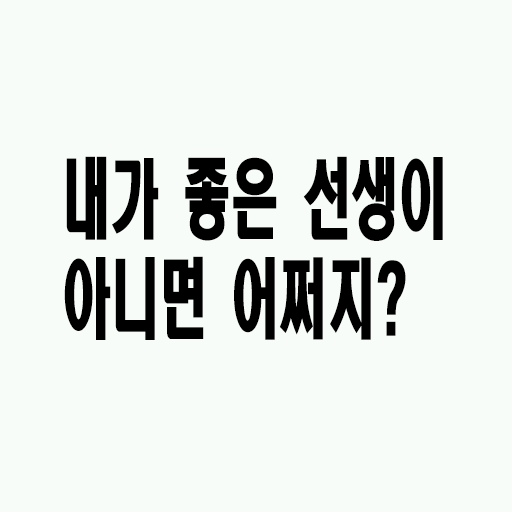
<style>
.page{position:relative;width:512px;height:512px;background:#f8fcf8}
.page>*{position:absolute;margin:0}
.t1{font:86.4px/100px "HeadlineR-HM";color:#000000;scale:0.56 1}
</style>
<div class="page">
<p class="t1" style="left:64px;top:156px;width:379px;height:184px">내가 좋은 선생이 아니면 어쩌지?</p>
</div>
